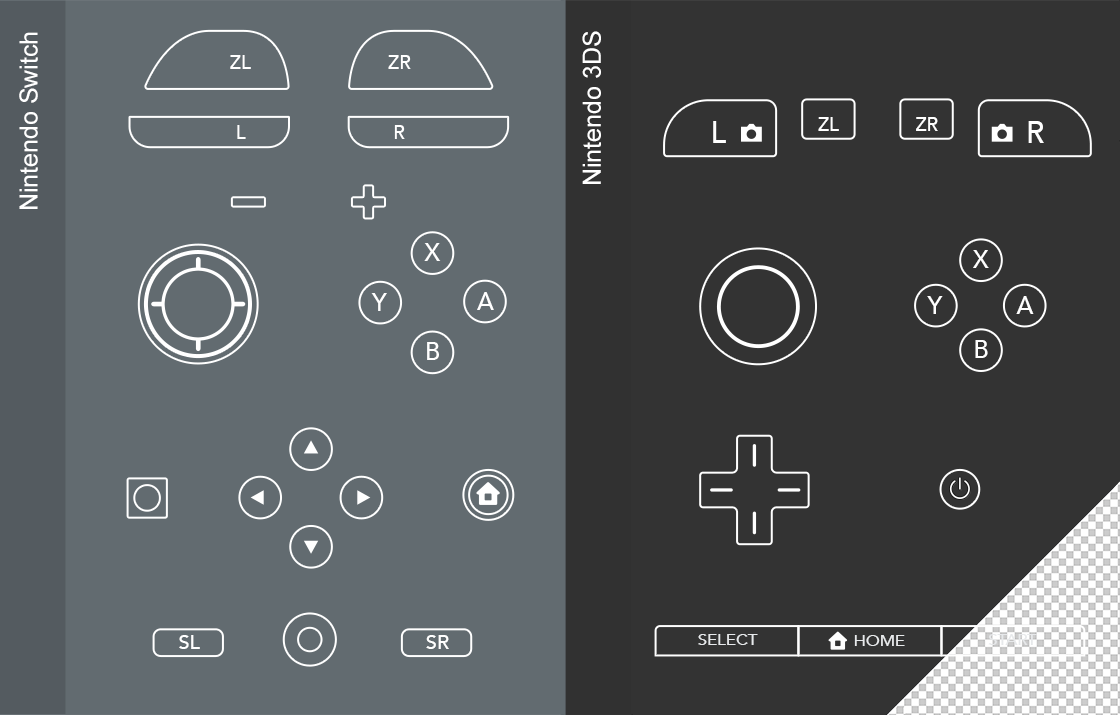
<style>
.page{position:relative;width:1120px;height:715px;background:#626b70}
.page>*{position:absolute;margin:0}
.t1{font:25px "ArialMT";color:#ffffff}
.t2{font:19.1px "Avenir-Medium";color:#ffffff}
.t3{font:29.7px "Avenir-Medium";color:#ffffff}
.t4{font:18.5px "Avenir-Medium";color:#ffffff}
.t5{font:24.2px "Avenir-Medium";color:#ffffff}
.t6{font:19.8px "Avenir-Medium";color:#ffffff}
.t7{font:15px "Avenir-Medium";color:#e7e9eb;scale:1.11 1}
</style>
<div class="page">
<p class="t1" style="left:19px;top:32px;width:19px;height:177px;rotate:-90deg">Nintendo Switch</p>
<p class="t1" style="left:582px;top:31px;width:19px;height:153px;rotate:-90deg">Nintendo 3DS</p>
<p class="t2" style="left:230px;top:55px;width:21px;height:14px">ZL</p>
<p class="t2" style="left:388px;top:55px;width:23px;height:14px">ZR</p>
<p class="t2" style="left:237px;top:125px;width:9px;height:14px">L</p>
<p class="t2" style="left:394px;top:125px;width:11px;height:14px">R</p>
<p class="t3" style="left:713px;top:121px;width:13px;height:22px">L</p>
<p class="t4" style="left:818px;top:117px;width:21px;height:14px">ZL</p>
<p class="t4" style="left:916px;top:117px;width:22px;height:14px">ZR</p>
<p class="t3" style="left:1028px;top:121px;width:16px;height:22px">R</p>
<p class="t5" style="left:424px;top:243px;width:17px;height:18px">X</p>
<p class="t5" style="left:973px;top:250px;width:16px;height:18px">X</p>
<p class="t5" style="left:371px;top:293px;width:16px;height:18px">Y</p>
<p class="t5" style="left:477px;top:292px;width:17px;height:18px">A</p>
<p class="t5" style="left:927px;top:296px;width:16px;height:18px">Y</p>
<p class="t5" style="left:1016px;top:296px;width:18px;height:18px">A</p>
<p class="t5" style="left:427px;top:342px;width:12px;height:18px">B</p>
<p class="t5" style="left:975px;top:340px;width:13px;height:18px">B</p>
<p class="t6" style="left:179px;top:635px;width:21px;height:14px">SL</p>
<p class="t6" style="left:426px;top:635px;width:23px;height:14px">SR</p>
<p class="t7" style="left:698px;top:634px;width:60px;height:11px">SELECT</p>
<p class="t7" style="left:854px;top:635px;width:51px;height:11px">HOME</p>
</div>
